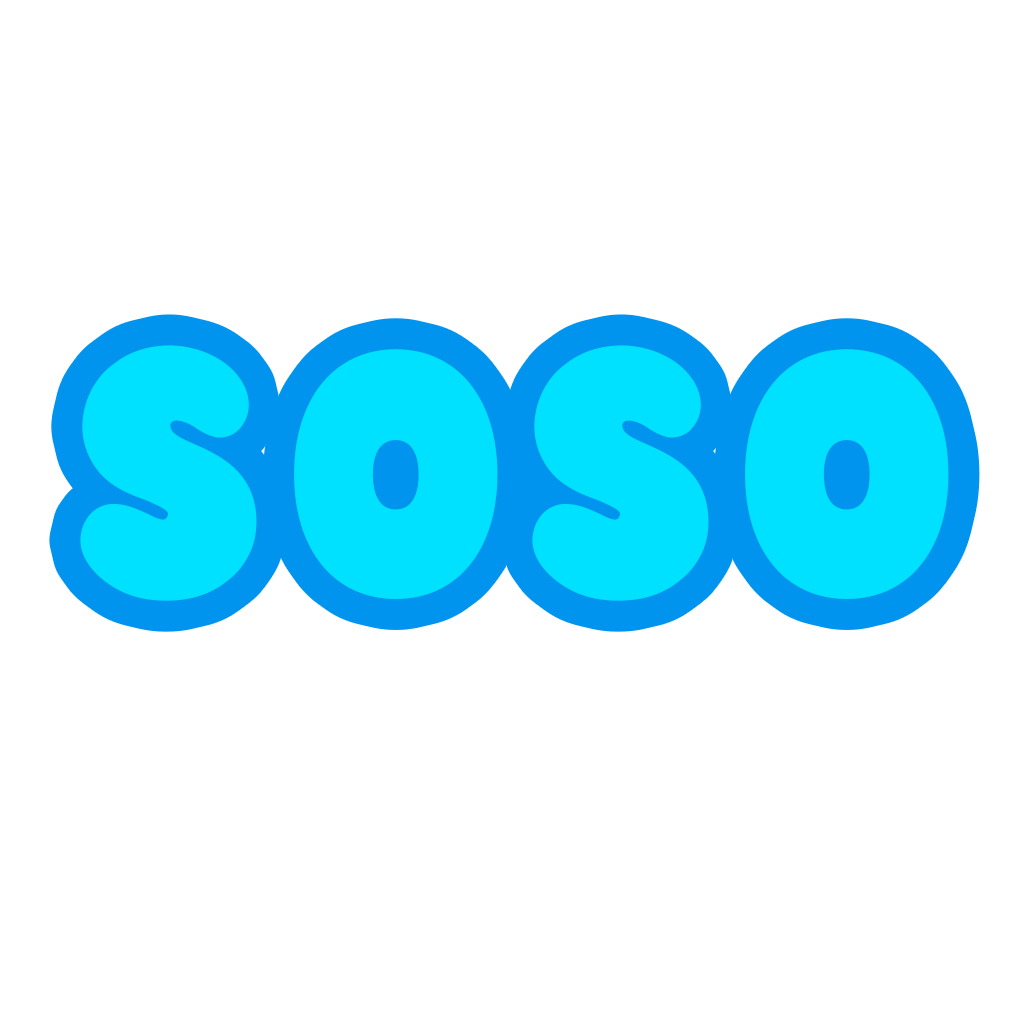
<style>
.page{position:relative;width:1024px;height:1024px;background:#ffffff}
.page>*{position:absolute;margin:0}
.t1{font:423.8px "funwariround";color:#00e1ff;scale:0.9 1}
</style>
<div class="page">
<p class="t1" style="left:80px;top:345px;width:869px;height:256px">soso</p>
</div>
